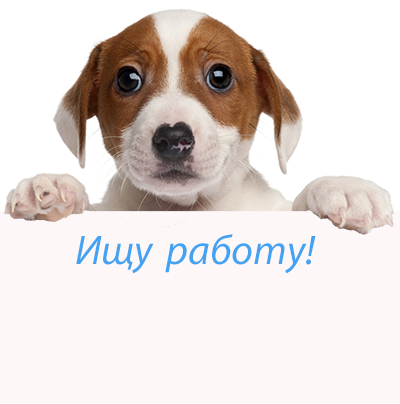
<style>
.page{position:relative;width:400px;height:404px;background:#fdf7f7}
.page>*{position:absolute;margin:0}
.t1{font:41.7px "MyriadPro-It";color:#43a2f1}
</style>
<div class="page">
<p class="t1" style="left:76px;top:234px;width:240px;height:40px">Ищу работу!</p>
</div>
